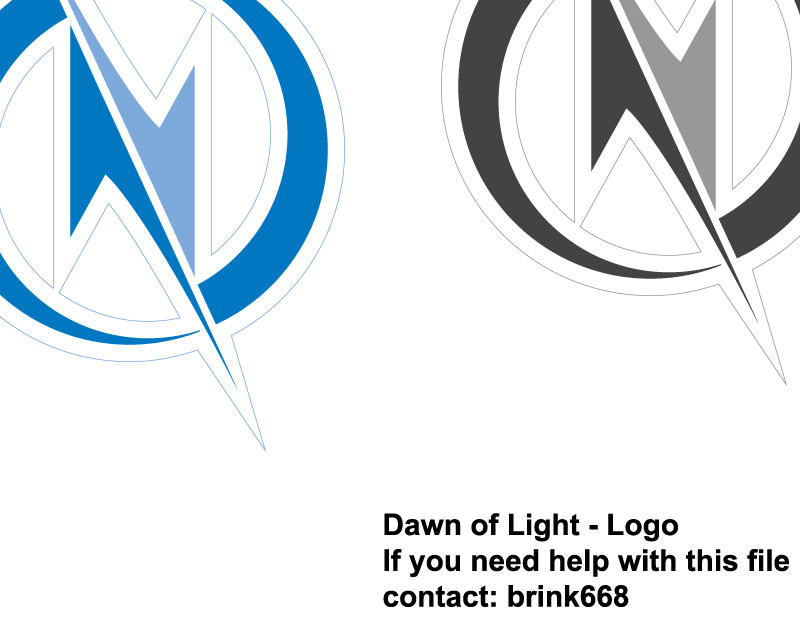
<style>
.page{position:relative;width:800px;height:630px;background:#ffffff}
.page>*{position:absolute;margin:0}
.t1{font:29.8px "Arial-BoldMT";color:#000000}
</style>
<div class="page">
<p class="t1" style="left:383px;top:513px;width:406px;height:94px">Dawn of Light - Logo<br>If you need help with this file<br>contact: brink668</p>
</div>
